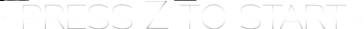
<style>
.page{position:relative;width:364px;height:29px;background:#ffffff}
.page>*{position:absolute;margin:0}
.t1{font:30px "Adequate-ExtraLight"}
.t2{font:36px "Adequate-ExtraLight"}
</style>
<div class="page">
<p class="t1" style="left:0px;top:0px;width:364px;height:30px">• PRESS <span class="t2">Z</span> TO START •</p>
</div>
